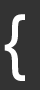
<style>
.page{position:relative;width:40px;height:90px;background:#333333}
.page>*{position:absolute;margin:0}
.t1{font:70.8px "ArialMT";letter-spacing:-0.05em;color:#ffffff}
</style>
<div class="page">
<p class="t1" style="left:4px;top:14px;width:21px;height:67px">{</p>
</div>
